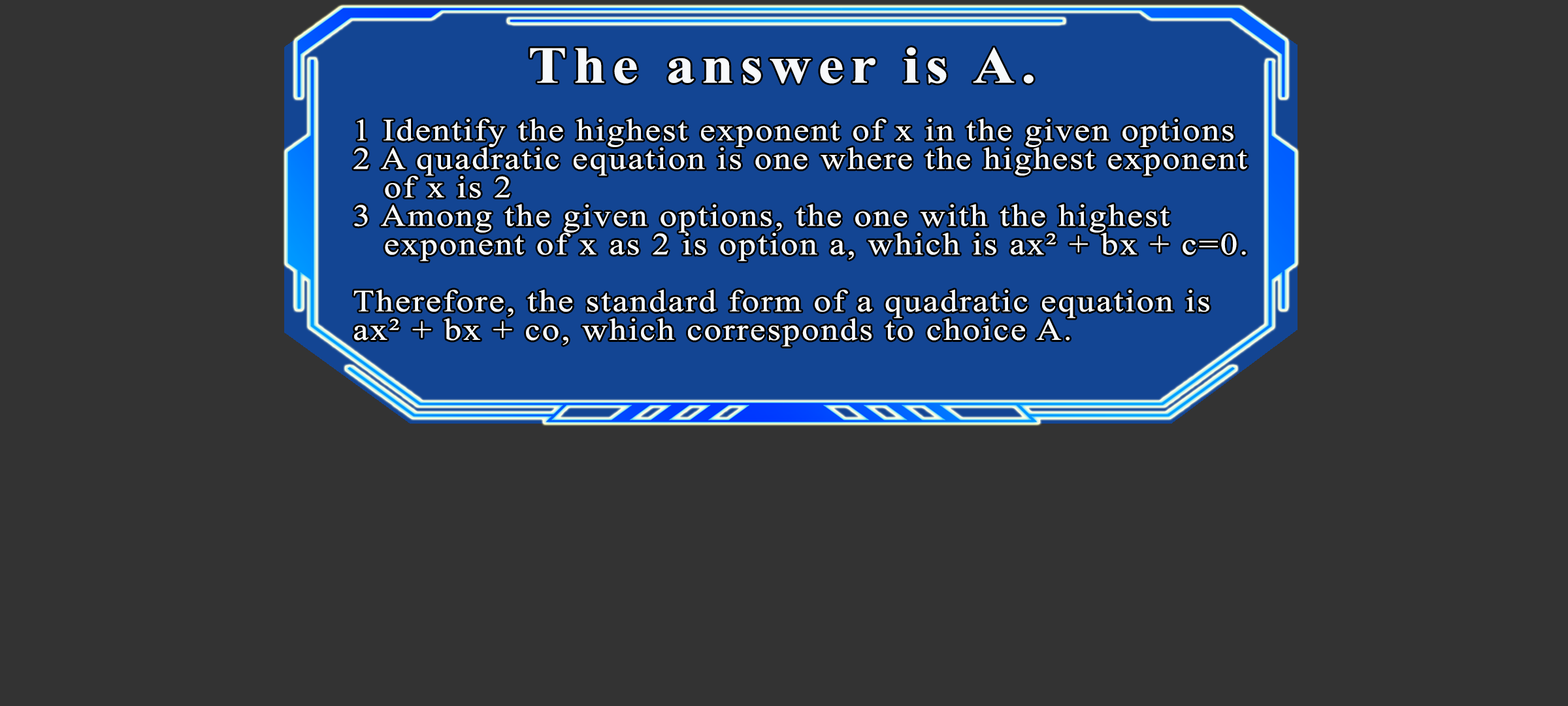
<style>
.page{position:relative;width:1568px;height:706px;background:#333333}
.page>*{position:absolute;margin:0}
.t1{font:51.7px "TimesNewRomanPS-BoldMT";letter-spacing:0.115em;color:#f7f9fb;scale:1.12 1}
.t2{font:30.9px/28.5px "TimesNewRomanPSMT";letter-spacing:0.055em;color:#f7f9fb;scale:1.12 1}
</style>
<div class="page">
<p class="t1" style="left:530px;top:47px;width:504px;height:37px">The answer is A.</p>
<p class="t2" style="left:353px;top:118px;width:894px;height:228px">1 Identify the highest exponent of x in the given options<br>2 A quadratic equation is one where the highest exponent<br>  of x is 2<br>3 Among the given options, the one with the highest<br>  exponent of x as 2 is option a, which is ax² + bx + c=0.<br><br>Therefore, the standard form of a quadratic equation is<br>ax² + bx + co, which corresponds to choice A.</p>
</div>
